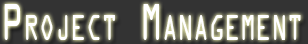
<style>
.page{position:relative;width:308px;height:44px;background:#333333}
.page>*{position:absolute;margin:0}
.t1{font:55.6px "OCRAExtended";color:#ffffff;font-variant:small-caps;scale:0.67 1}
</style>
<div class="page">
<p class="t1" style="left:4px;top:4px;width:297px;height:36px">Project Management</p>
</div>
